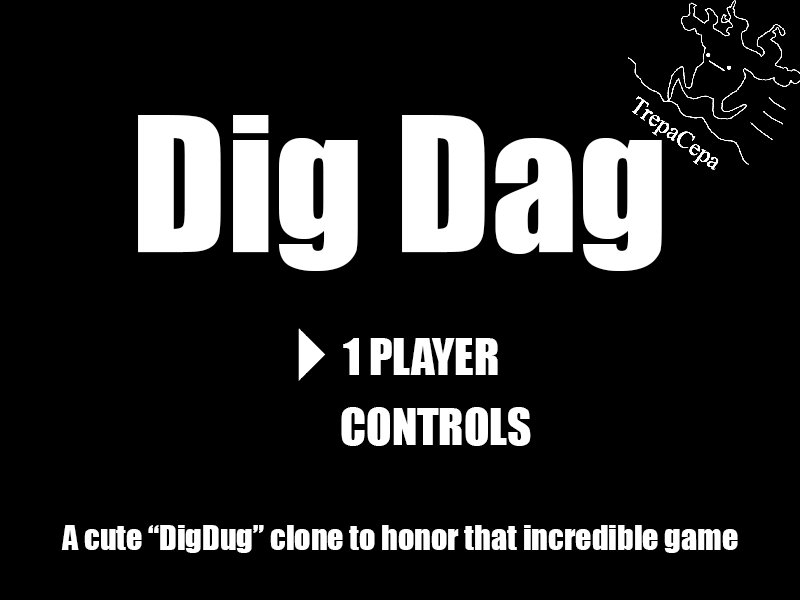
<style>
.page{position:relative;width:800px;height:600px;background:#000000}
.page>*{position:absolute;margin:0}
.t1{font:173.3px "Impact";color:#ffffff}
.t2{font:46.7px "Impact";color:#ffffff}
.t3{font:32px "Impact";color:#ffffff}
</style>
<div class="page">
<p class="t1" style="left:138px;top:115px;width:524px;height:156px">Dig Dag</p>
<p class="t2" style="left:341px;top:338px;width:190px;height:108px">1 PLAYER<br><br>CONTROLS</p>
<p class="t3" style="left:61px;top:525px;width:677px;height:28px">A cute “DigDug” clone to honor that incredible game</p>
</div>
